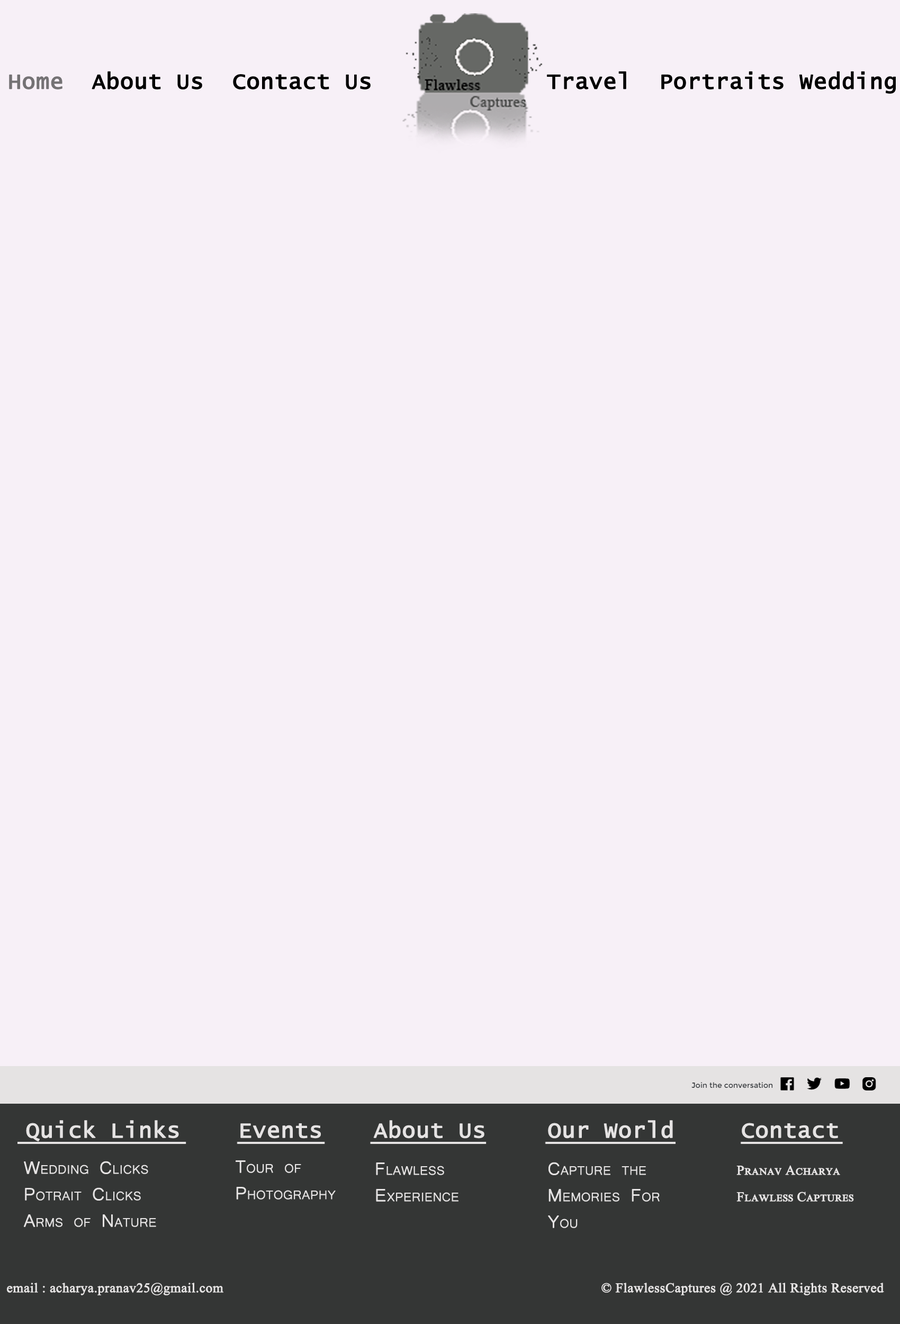
<style>
.page{position:relative;width:900px;height:1324px;background:#f7f0f7}
.page>*{position:absolute;margin:0}
.t1{font:22.1px "LucidaConsole";color:#000000;font-weight:bold}
.t2{font:22.1px "LucidaConsole";color:#747274;font-weight:bold}
.t3{font:22.1px "LucidaConsole";color:#e5e3e3;font-weight:bold}
.t4{font:22.1px/26.5px "Microsoft-Yi-Baiti";color:#e5e3e3;font-variant:small-caps;font-weight:bold}
.t5{font:13.2px/26.5px "TimesNewRomanPSMT";color:#e5e3e3;font-variant:small-caps;font-weight:bold}
.t6{font:13.2px "TimesNewRomanPSMT";color:#e5e3e3;font-weight:bold}
</style>
<div class="page">
<p class="t1" style="left:9px;top:71px;width:887px;height:23px"><span class="t2">Home  </span>About Us  Contact Us          Travel  Portraits Wedding</p>
<p class="t3" style="left:26px;top:1120px;width:813px;height:22px">Quick Links   Events   About Us    Our World    Contact</p>
<p class="t4" style="left:23px;top:1161px;width:133px;height:66px">Wedding Clicks<br>Potrait Clicks<br>Arms of Nature</p>
<p class="t4" style="left:236px;top:1161px;width:100px;height:39px">Tour of<br>Photography</p>
<p class="t4" style="left:376px;top:1163px;width:83px;height:39px">Flawless <br>Experience</p>
<p class="t4" style="left:548px;top:1162px;width:112px;height:66px">Capture the<br>Memories For <br>You</p>
<p class="t5" style="left:737px;top:1165px;width:117px;height:37px">Pranav Acharya<br>Flawless Captures</p>
<p class="t6" style="left:7px;top:1283px;width:878px;height:13px">email : acharya.pranav25@gmail.com                       © FlawlessCaptures @ 2021 All Rights Reserved</p>
</div>
